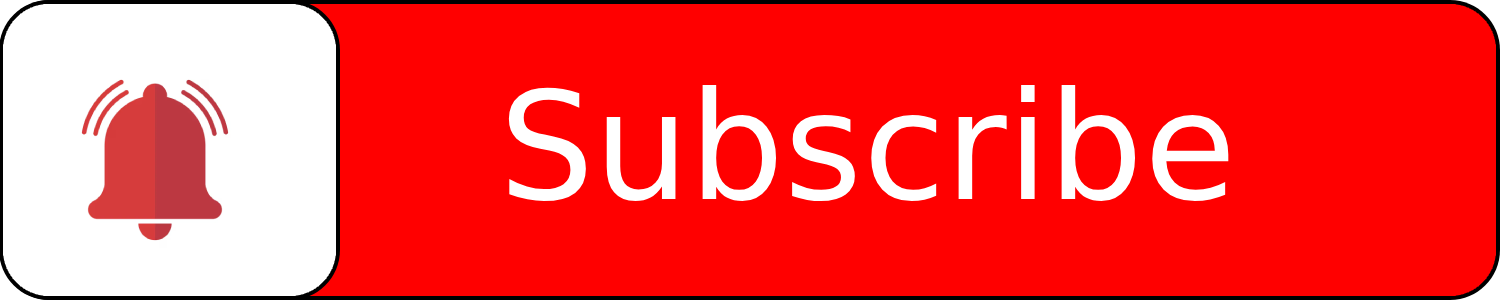
<style>
.page{position:relative;width:1500px;height:300px;background:#ff0000}
.page>*{position:absolute;margin:0}
.t1{font:150px "DejaVuSans";color:#ffffff}
</style>
<div class="page">
<p class="t1" style="left:508px;top:85px;width:721px;height:117px">Subscribe</p>
</div>
